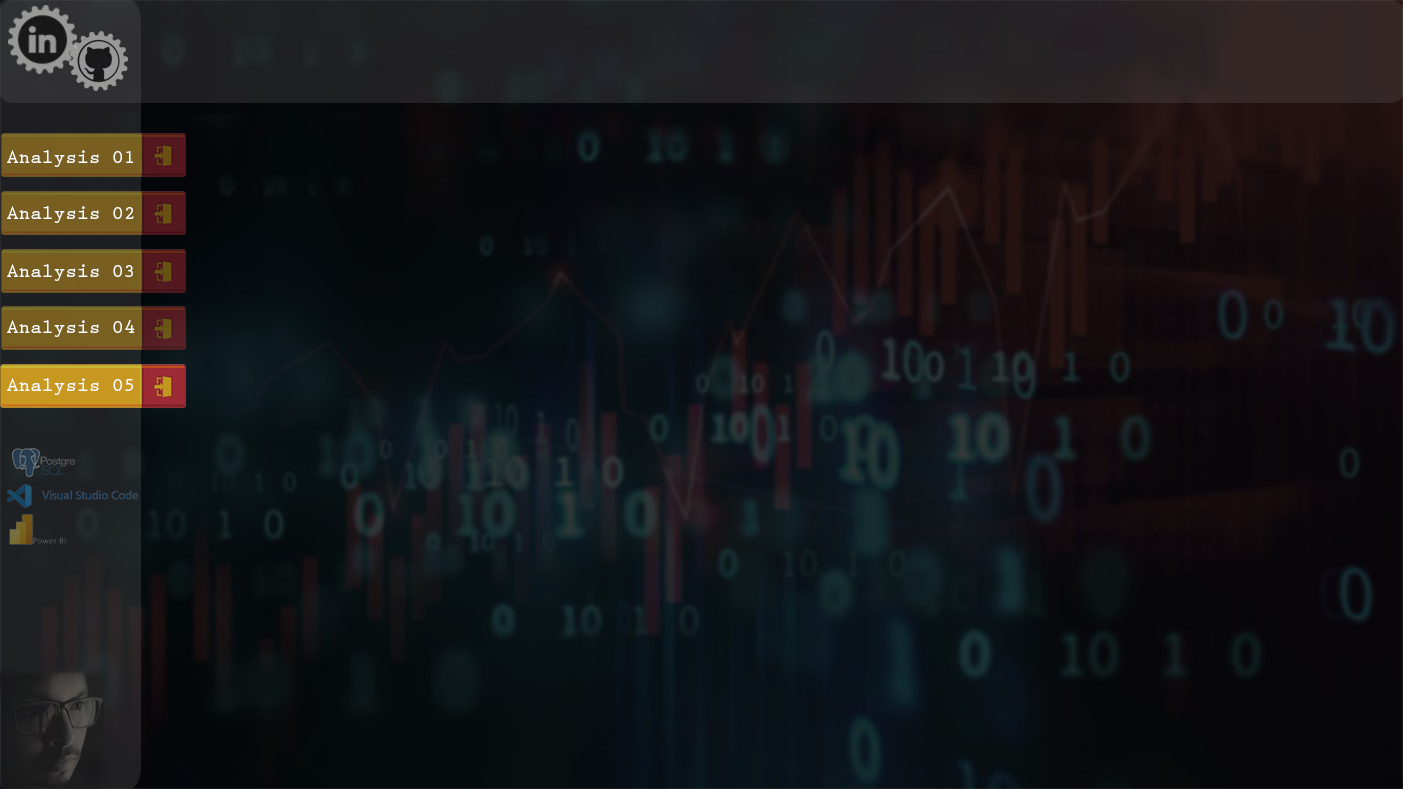
<style>
.page{position:relative;width:1403px;height:789px}
.page>*{position:absolute;margin:0}
.t1{font:19.4px "PrestigeEliteStd-Bd";color:#ffffff}
</style>
<div class="page">
<p class="t1" style="left:7px;top:150px;width:127px;height:17px">Analysis 01</p>
<p class="t1" style="left:7px;top:206px;width:127px;height:17px">Analysis 02</p>
<p class="t1" style="left:7px;top:264px;width:126px;height:17px">Analysis 03</p>
<p class="t1" style="left:7px;top:320px;width:128px;height:17px">Analysis 04</p>
<p class="t1" style="left:7px;top:378px;width:126px;height:17px">Analysis 05</p>
</div>
